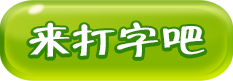
<style>
.page{position:relative;width:233px;height:81px}
.page>*{position:absolute;margin:0}
.t1{font:37.5px "FZZBHJW--GB1-0";letter-spacing:-0.02em;color:#ffffff;scale:1.2 1}
</style>
<div class="page">
<p class="t1" style="left:29px;top:22px;width:176px;height:35px">来打字吧</p>
</div>
